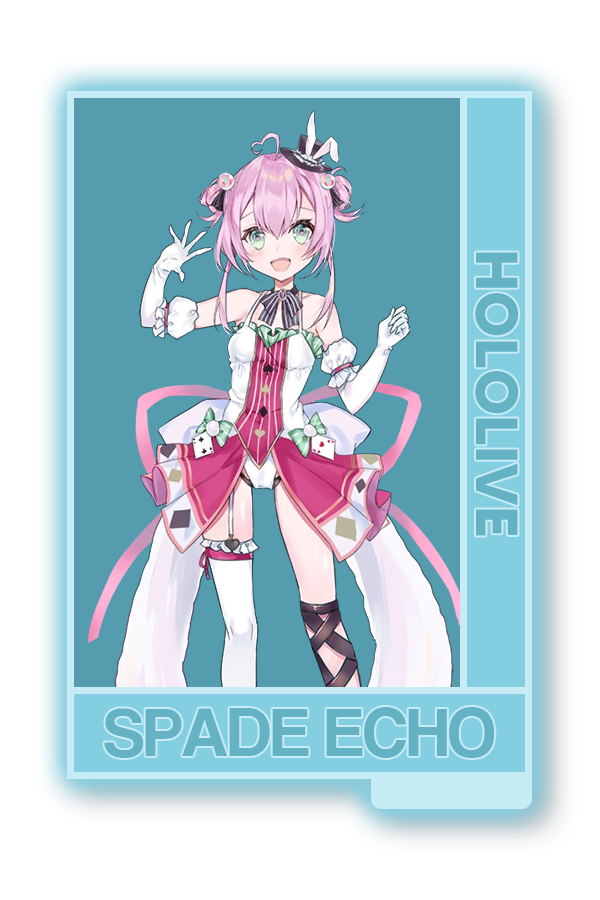
<style>
.page{position:relative;width:600px;height:900px;background:#ffffff}
.page>*{position:absolute;margin:0}
.t1{font:59.2px "MADETOMMY-Bold";color:#66b2c5}
.t2{font:70.9px "CoolveticaRg-Regular";color:#66b2c5}
</style>
<div class="page">
<p class="t1" style="left:475px;top:252px;width:44px;height:284px;rotate:90deg">HOLOLIVE</p>
<p class="t2" style="left:104px;top:707px;width:391px;height:51px">SPADE ECHO</p>
</div>
